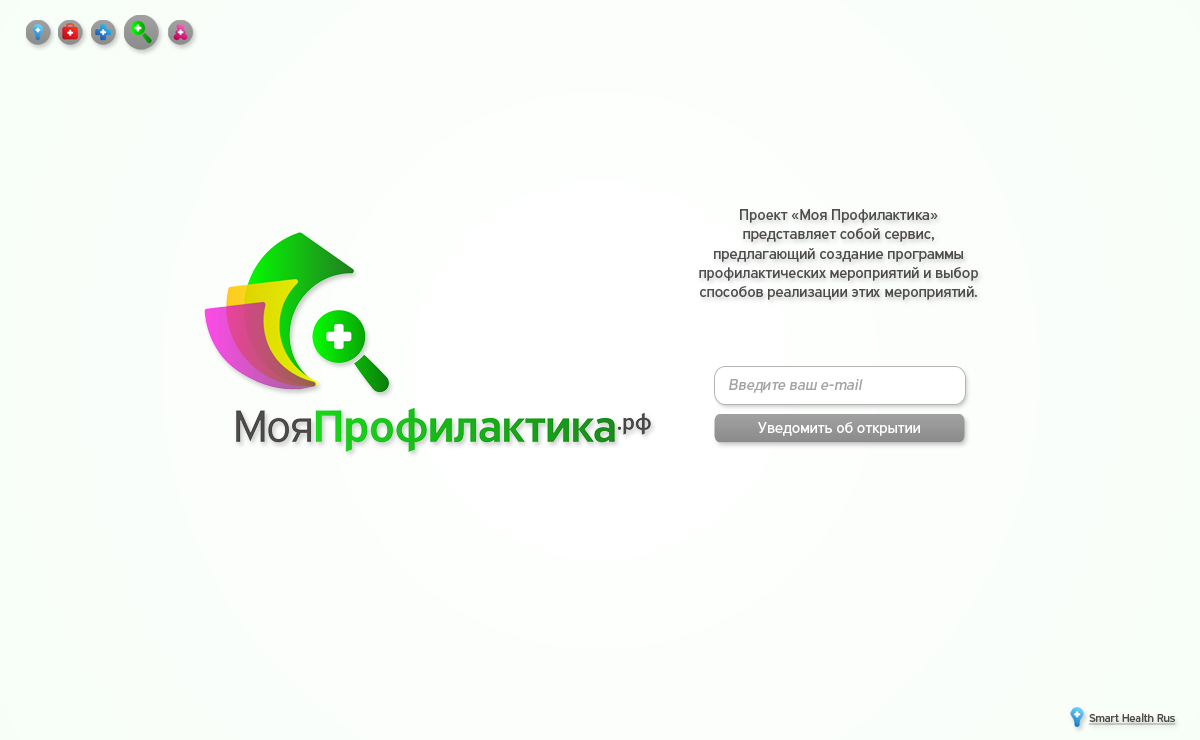
<style>
.page{position:relative;width:1200px;height:740px}
.page>*{position:absolute;margin:0}
.t1{font:16px "PFHighwaySansPro-Regular";color:#4f4c4c}
.t2{font:16px "PFHighwaySansPro-Regular";color:#a4a4a4;font-style:italic}
.t3{font:16px "PFHighwaySansPro-Regular";color:#fcfeff}
.t4{font:12px "PFHighwaySansPro-Regular";color:#4f4c4c;text-decoration:underline}
</style>
<div class="page">
<p class="t1" style="left:699px;top:209px;width:279px;height:91px;text-align:center">Проект «Моя Профилактика» представляет собой сервис, предлагающий создание программы профилактических мероприятий и выбор способов реализации этих мероприятий.</p>
<p class="t2" style="left:729px;top:379px;width:134px;height:14px">Введите ваш e-mail</p>
<p class="t3" style="left:758px;top:422px;width:162px;height:14px">Уведомить об открытии</p>
<p class="t4" style="left:1088px;top:713px;width:88px;height:12px">Smart Health Rus</p>
</div>
